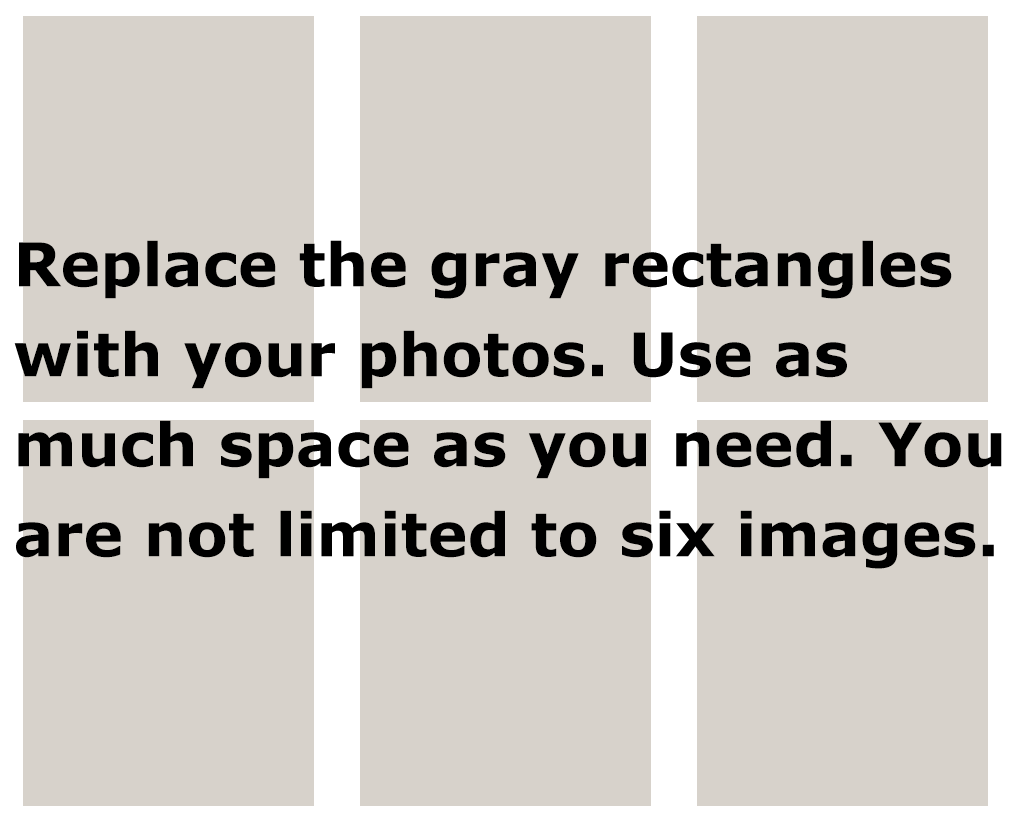
<style>
.page{position:relative;width:1024px;height:839px;background:#d7d2cb}
.page>*{position:absolute;margin:0}
.t1{font:60px/90px "Verdana-Bold";color:#000000}
</style>
<div class="page">
<p class="t1" style="left:14px;top:240px;width:988px;height:329px">Replace the gray rectangles <br>with your photos. Use as <br>much space as you need. You<br>are not limited to six images.</p>
</div>
